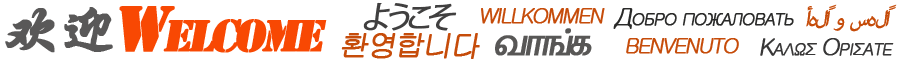
<style>
.page{position:relative;width:900px;height:60px;background:#ffffff}
.page>*{position:absolute;margin:0}
.t1{font:60px "StencilStd";letter-spacing:-0.1em;color:#f84803;font-variant:small-caps;font-weight:bold;font-style:italic}
.t2{font:30px "KozGoPr6N-Regular";letter-spacing:-0.3em;color:#403f3f;font-variant:small-caps;font-weight:bold;font-style:italic}
.t3{font:30px "AdobeArabic-Regular";letter-spacing:-0.1em;color:#c64c0a;font-variant:small-caps;font-weight:bold;font-style:italic}
.t4{font:60px "STXingkai";letter-spacing:-0.1em;color:#595858;font-variant:small-caps;font-weight:bold;font-style:italic}
.t5{font:30px "Gulim";letter-spacing:-0.1em;color:#c64c0a;font-variant:small-caps;font-weight:bold;font-style:italic}
.t6{font:24px "Gulim";letter-spacing:-0.1em;color:#2a2a29;font-variant:small-caps;font-weight:bold;font-style:italic}
.t7{font:30px "Latha";letter-spacing:-0.1em;color:#585756;font-variant:small-caps;font-weight:bold;font-style:italic}
.t8{font:24px "Gulim";letter-spacing:-0.1em;color:#383737;font-variant:small-caps;font-weight:bold;font-style:italic}
</style>
<div class="page">
<p class="t1" style="left:119px;top:6px;width:208px;height:47px">Welcome</p>
<p class="t2" style="left:363px;top:2px;width:94px;height:29px">ようこそ</p>
<p class="t3" style="left:806px;top:4px;width:91px;height:28px">أهلاً و سهلاً</p>
<p class="t4" style="left:5px;top:7px;width:108px;height:46px">欢迎</p>
<p class="t5" style="left:481px;top:8px;width:124px;height:16px">willkommen</p>
<p class="t6" style="left:613px;top:8px;width:181px;height:21px">Добро пожаловать</p>
<p class="t7" style="left:495px;top:28px;width:97px;height:28px">வாங்க</p>
<p class="t5" style="left:341px;top:33px;width:139px;height:26px">환영합니다</p>
<p class="t5" style="left:626px;top:38px;width:113px;height:16px">benvenuto</p>
<p class="t8" style="left:760px;top:38px;width:134px;height:18px">Καλώς Ορίσατε</p>
</div>
